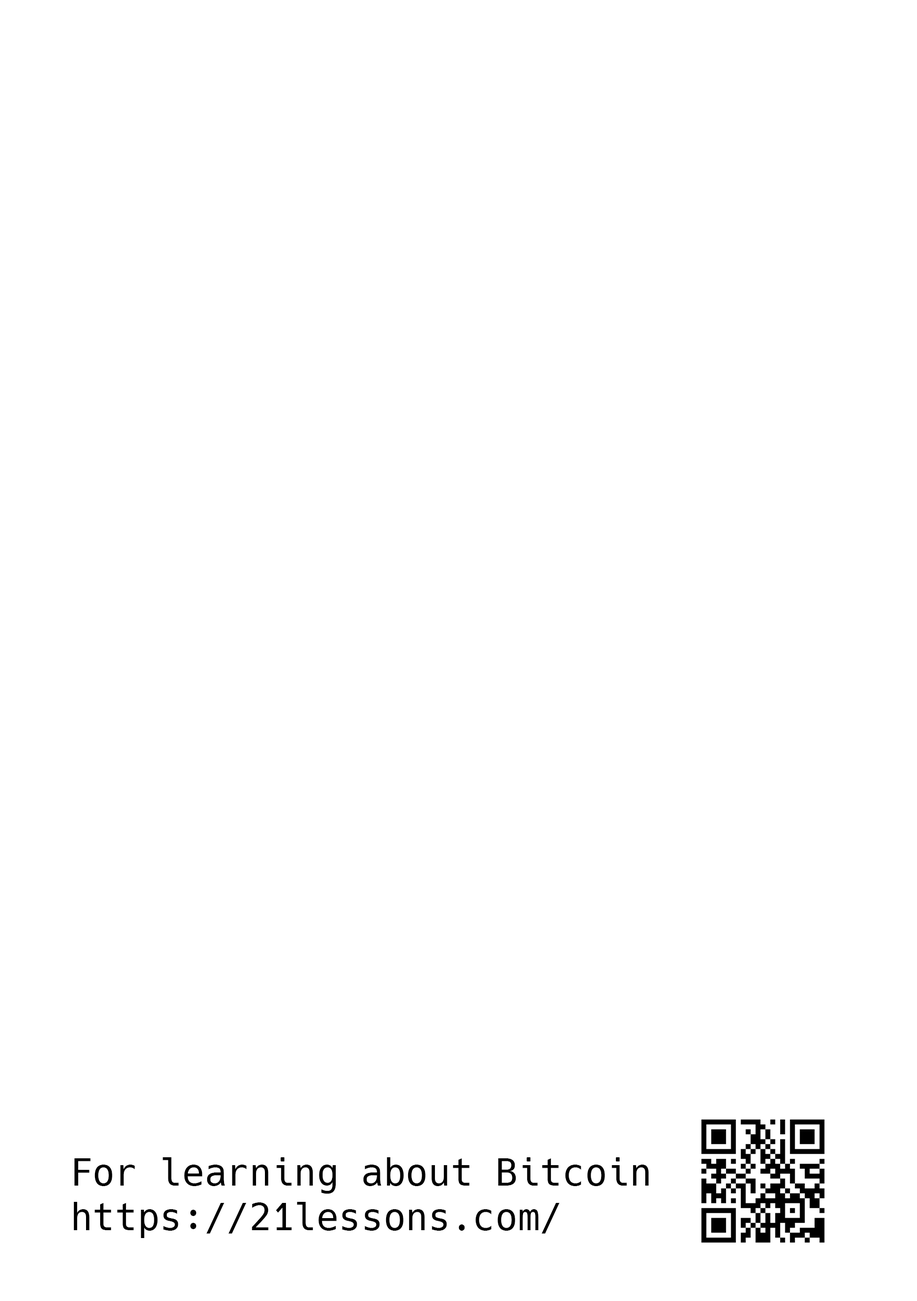
<style>
.page{position:relative;width:917px;height:1301px;background:#ffffff}
.page>*{position:absolute;margin:0}
.t1{font:37.1px "Hack-Regular";color:#000000}
</style>
<div class="page">
<p class="t1" style="left:73px;top:1157px;width:576px;height:81px">For learning about Bitcoin<br>https://21lessons.com/</p>
</div>
